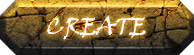
<style>
.page{position:relative;width:194px;height:55px}
.page>*{position:absolute;margin:0}
.t1{font:24px "VinerHandITC";color:#fefefe}
</style>
<div class="page">
<p class="t1" style="left:47px;top:16px;width:99px;height:24px">CREATE</p>
</div>
